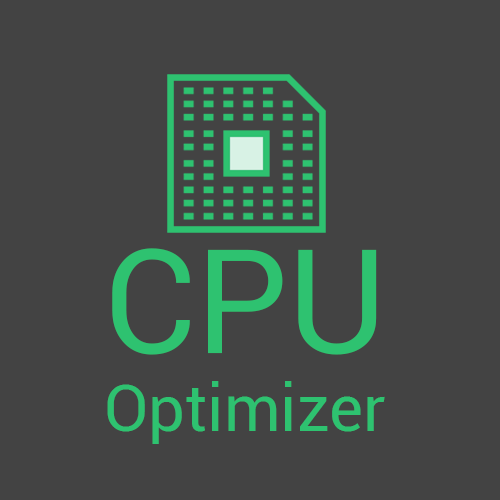
<style>
.page{position:relative;width:500px;height:500px;background:#434343}
.page>*{position:absolute;margin:0}
.t1{font:65px "Roboto-Regular";color:#2ec270}
.t2{font:145px "Roboto-Regular";color:#2ec270}
</style>
<div class="page">
<p class="t1" style="left:107px;top:248px;width:278px;height:196px"><span class="t2">CPU<br></span>Optimizer</p>
</div>
